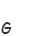
<style>
.page{position:relative;width:36px;height:36px;background:#ffffff}
.page>*{position:absolute;margin:0}
.t1{font:16px "ComicSansMS";color:#323333;text-transform:uppercase}
</style>
<div class="page">
<p class="t1" style="left:1px;top:22px;width:11px;height:12px">G</p>
</div>
